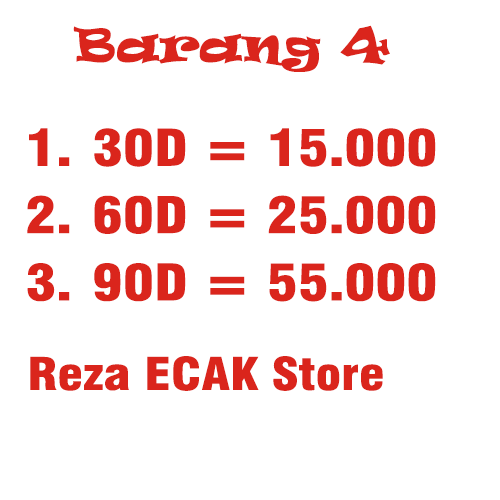
<style>
.page{position:relative;width:500px;height:500px;background:#ffffff}
.page>*{position:absolute;margin:0}
.t1{font:44px "Ravie";color:#da251c;scale:1.17 1}
.t2{font:49.4px "Swiss721BT-BlackCondensed";color:#da251c;scale:1.17 1}
.t3{font:44px "Swiss721BT-BlackCondensed";color:#da251c;scale:1.17 1}
</style>
<div class="page">
<p class="t1" style="left:73px;top:25px;width:317px;height:47px">Barang 4</p>
<p class="t2" style="left:27px;top:128px;width:409px;height:174px;text-align:center">30D = 15.000<br>60D = 25.000<br>90D = 55.000</p>
<p class="t3" style="left:30px;top:356px;width:353px;height:35px">Reza ECAK Store</p>
</div>
